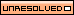
<style>
.page{position:relative;width:74px;height:15px;background:#ffaf7f}
.page>*{position:absolute;margin:0}
.t1{font:8px "BitDustTwo";color:#000000}
</style>
<div class="page">
<p class="t1" style="left:3px;top:6px;width:59px;height:5px">UNRESOLVED</p>
</div>
